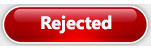
<style>
.page{position:relative;width:151px;height:50px}
.page>*{position:absolute;margin:0}
.t1{font:18px "NirmalaUI-Bold";color:#f3f7f7}
</style>
<div class="page">
<p class="t1" style="left:41px;top:15px;width:71px;height:19px">Rejected</p>
</div>
